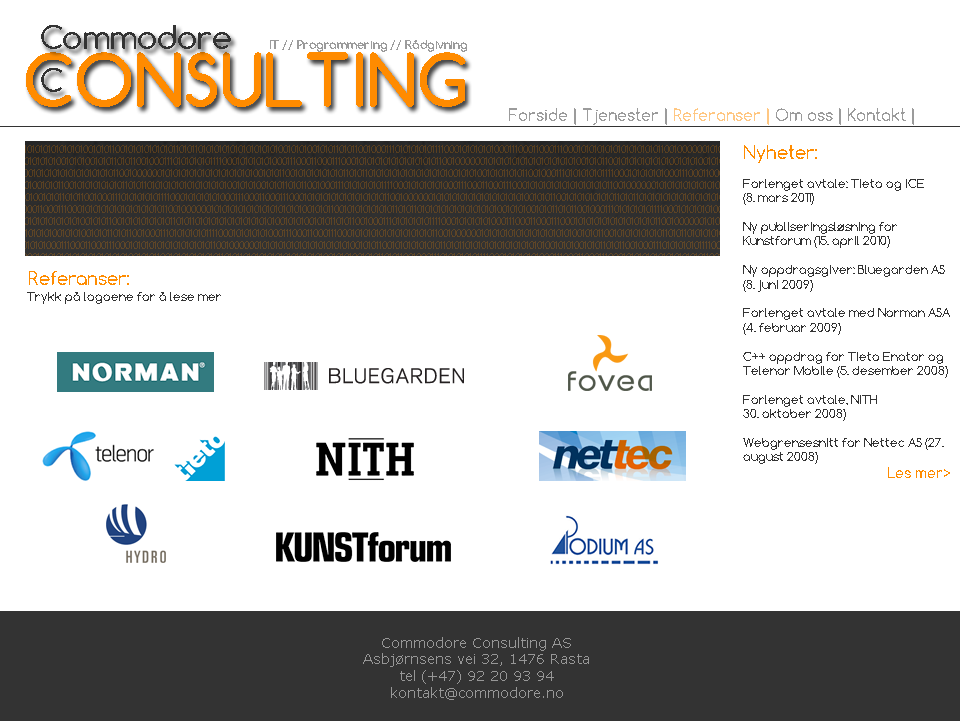
<style>
.page{position:relative;width:960px;height:721px;background:#ffffff}
.page>*{position:absolute;margin:0}
.t1{font:16px "Comfortaa";color:#9b9b9b}
.t2{font:12px "Comfortaa";color:#333333}
.t3{font:18px "Comfortaa";color:#ff8c00}
.t4{font:14px "Comfortaa";color:#ff8c00}
.t5{font:14px "Verdana";color:#979797}
</style>
<div class="page">
<p class="t1" style="left:509px;top:108px;width:405px;height:17px">Forside | Tjenester | Referanser | Om oss | Kontakt |</p>
<p class="t2" style="left:743px;top:145px;width:207px;height:333px"><span class="t3">Nyheter:<br></span><br>Forlenget avtale: Tieto og ICE <br>(8. mars 2011)<br><br>Ny publiseringsløsning for <br>Kunstforum (15. april 2010)<br><br>Ny oppdragsgiver: Bluegarden AS (8. juni 2009)<br><br>Forlenget avtale med Norman ASA (4. februar 2009)<br><br>C++ oppdrag for Tieto Enator og Telenor Mobile (5. desember 2008)<br><br>Forlenget avtale, NITH <br>30. oktober 2008)<br><br>Webgrensesnitt for Nettec AS (27. august 2008)<br>    <span class="t4">Les mer&gt;</span></p>
<p class="t3" style="left:29px;top:271px;width:100px;height:14px">Referanser:</p>
<p class="t2" style="left:27px;top:292px;width:194px;height:12px">Trykk på logoene for å lese mer</p>
<p class="t5" style="left:363px;top:637px;width:226px;height:63px;text-align:center">Commodore Consulting AS<br>Asbjørnsens vei 32, 1476 Rasta<br>tel (+47) 92 20 93 94<br>kontakt@commodore.no</p>
</div>
